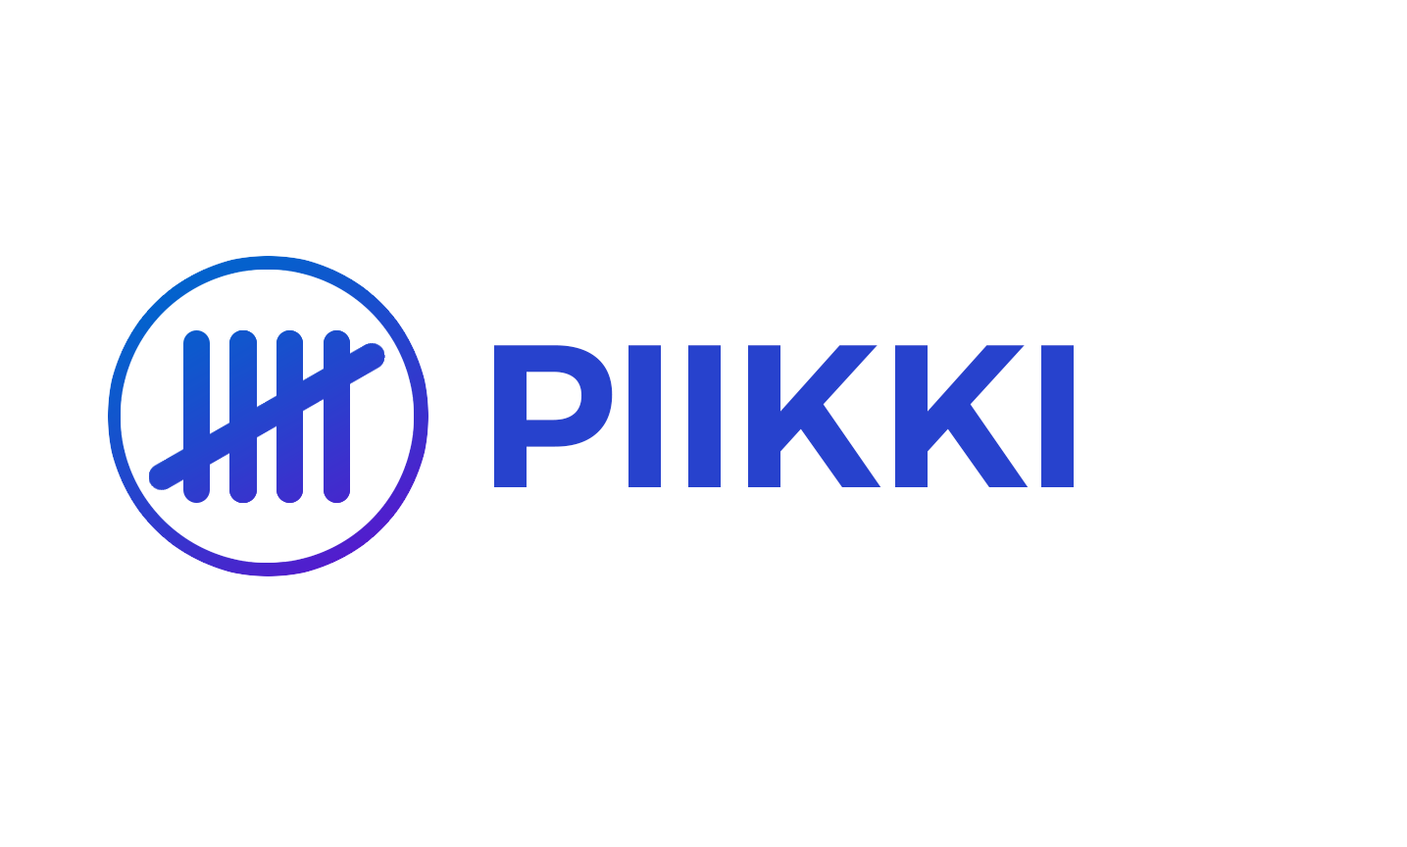
<style>
.page{position:relative;width:1407px;height:847px;background:#ffffff}
.page>*{position:absolute;margin:0}
.t1{font:202.9px "Montserrat-SemiBold";letter-spacing:-0.02em;color:#2742cd}
</style>
<div class="page">
<p class="t1" style="left:494px;top:345px;width:580px;height:142px">PIIKKI</p>
</div>
